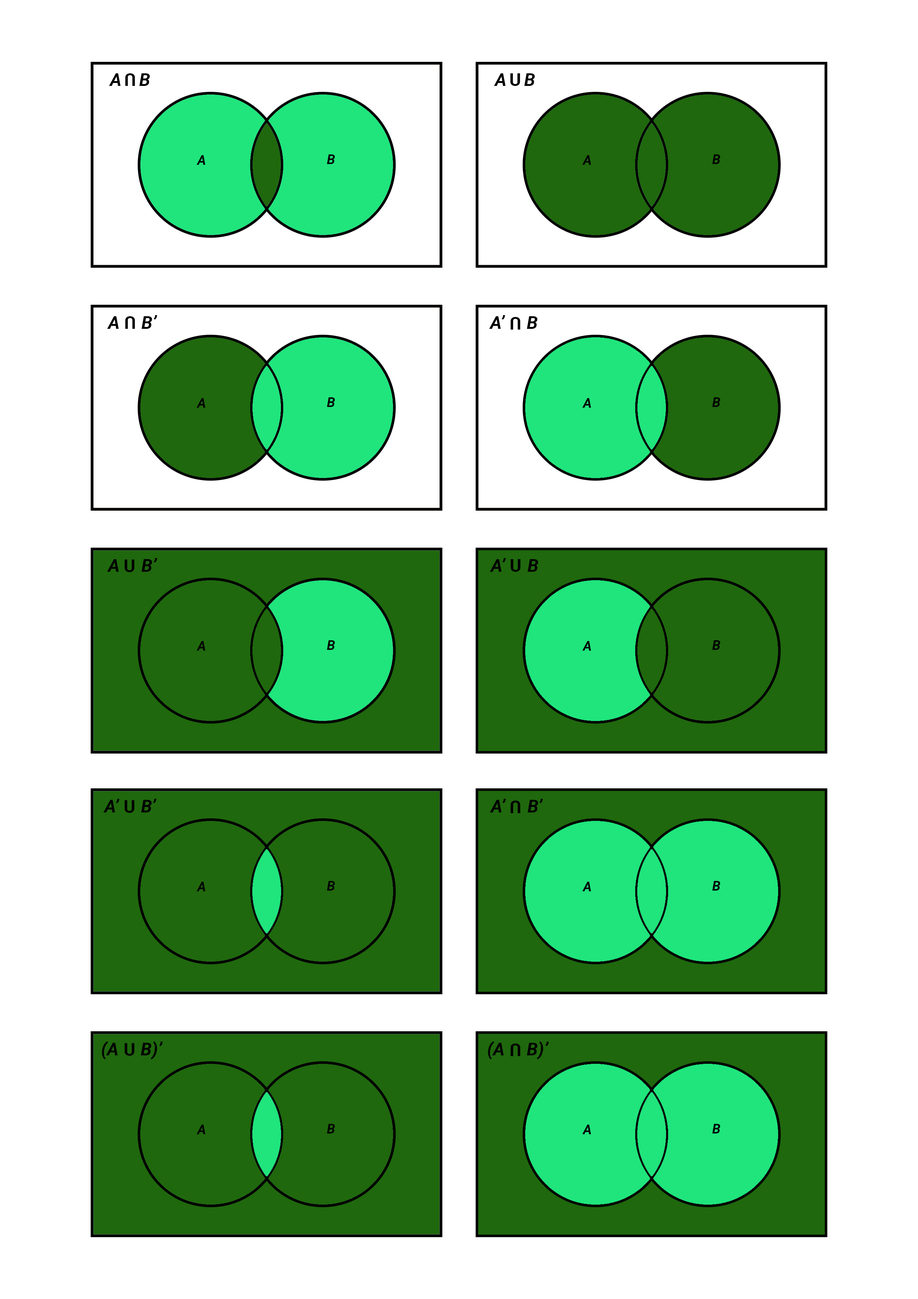
<style>
.page{position:relative;width:918px;height:1299px;background:#ffffff}
.page>*{position:absolute;margin:0}
.t1{font:17.8px "Roboto-BoldItalic";color:#000000}
.t2{font:17.8px "Roboto-Bold";color:#000000}
.t3{font:13.3px "Roboto-BoldItalic";color:#000000}
</style>
<div class="page">
<p class="t1" style="left:109px;top:73px;width:41px;height:13px">A    B</p>
<p class="t2" style="left:125px;top:73px;width:10px;height:13px;rotate:180deg">U</p>
<p class="t1" style="left:494px;top:73px;width:41px;height:13px">A    B</p>
<p class="t2" style="left:510px;top:73px;width:10px;height:13px">U</p>
<p class="t3" style="left:197px;top:155px;width:8px;height:10px">A</p>
<p class="t3" style="left:327px;top:154px;width:8px;height:10px">B</p>
<p class="t3" style="left:582px;top:155px;width:9px;height:10px">A</p>
<p class="t3" style="left:712px;top:154px;width:8px;height:10px">B</p>
<p class="t1" style="left:107px;top:315px;width:50px;height:14px">A     B’</p>
<p class="t2" style="left:125px;top:316px;width:10px;height:13px;rotate:180deg">U</p>
<p class="t1" style="left:489px;top:315px;width:49px;height:14px">A’     B</p>
<p class="t2" style="left:511px;top:317px;width:10px;height:12px;rotate:180deg">U</p>
<p class="t3" style="left:197px;top:398px;width:8px;height:10px">A</p>
<p class="t3" style="left:327px;top:397px;width:8px;height:10px">B</p>
<p class="t3" style="left:582px;top:398px;width:9px;height:10px">A</p>
<p class="t3" style="left:712px;top:397px;width:8px;height:10px">B</p>
<p class="t1" style="left:107px;top:558px;width:50px;height:14px">A     B’</p>
<p class="t1" style="left:490px;top:558px;width:48px;height:14px">A’     B</p>
<p class="t2" style="left:124px;top:559px;width:10px;height:13px">U</p>
<p class="t2" style="left:511px;top:559px;width:10px;height:13px">U</p>
<p class="t3" style="left:197px;top:641px;width:8px;height:9px">A</p>
<p class="t3" style="left:327px;top:640px;width:8px;height:10px">B</p>
<p class="t3" style="left:582px;top:641px;width:9px;height:9px">A</p>
<p class="t3" style="left:712px;top:640px;width:8px;height:10px">B</p>
<p class="t1" style="left:103px;top:799px;width:54px;height:13px">A’     B’</p>
<p class="t2" style="left:124px;top:800px;width:10px;height:13px">U</p>
<p class="t1" style="left:490px;top:799px;width:53px;height:13px">A’     B’</p>
<p class="t2" style="left:511px;top:800px;width:10px;height:13px;rotate:180deg">U</p>
<p class="t3" style="left:197px;top:881px;width:8px;height:10px">A</p>
<p class="t3" style="left:327px;top:881px;width:8px;height:9px">B</p>
<p class="t3" style="left:582px;top:881px;width:9px;height:10px">A</p>
<p class="t3" style="left:712px;top:881px;width:8px;height:9px">B</p>
<p class="t1" style="left:102px;top:1041px;width:61px;height:18px">(A     B)’</p>
<p class="t2" style="left:124px;top:1043px;width:10px;height:13px">U</p>
<p class="t1" style="left:488px;top:1041px;width:61px;height:18px">(A     B)’</p>
<p class="t2" style="left:511px;top:1043px;width:10px;height:13px;rotate:180deg">U</p>
<p class="t3" style="left:197px;top:1124px;width:8px;height:10px">A</p>
<p class="t3" style="left:327px;top:1124px;width:8px;height:9px">B</p>
<p class="t3" style="left:582px;top:1124px;width:9px;height:10px">A</p>
<p class="t3" style="left:712px;top:1124px;width:8px;height:9px">B</p>
</div>
